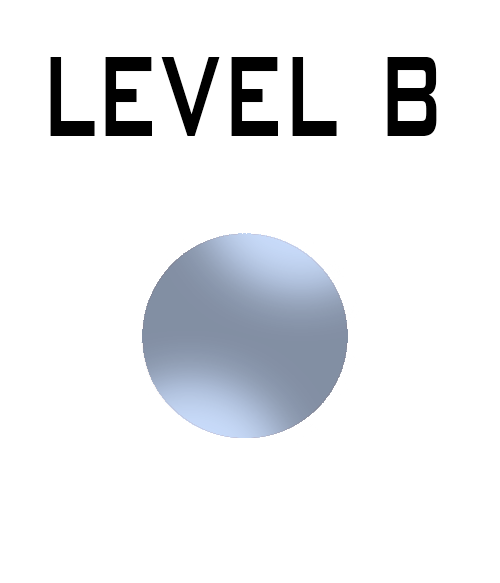
<style>
.page{position:relative;width:500px;height:583px;background:#ffffff}
.page>*{position:absolute;margin:0}
.t1{font:186.2px "BankGothicBT-Medium";color:#000000;scale:0.54 1}
</style>
<div class="page">
<p class="t1" style="left:50px;top:57px;width:387px;height:79px">level b</p>
</div>
